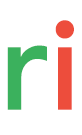
<style>
.page{position:relative;width:82px;height:135px;background:#ffffff}
.page>*{position:absolute;margin:0}
.t1{font:122.1px "GoogleSans-Medium";color:#3bb15d}
.t2{font:122.1px "GoogleSans-Medium";color:#ed4d3c}
</style>
<div class="page">
<p class="t1" style="left:7px;top:20px;width:67px;height:90px">r<span class="t2">i</span></p>
</div>
